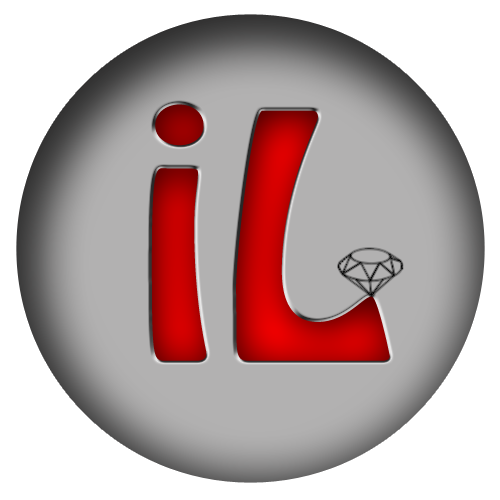
<style>
.page{position:relative;width:500px;height:500px;background:#ffffff}
.page>*{position:absolute;margin:0}
.t1{font:300px "HoboStd";scale:1.04 1}
</style>
<div class="page">
<p class="t1" style="left:151px;top:104px;width:239px;height:257px">iL</p>
</div>
